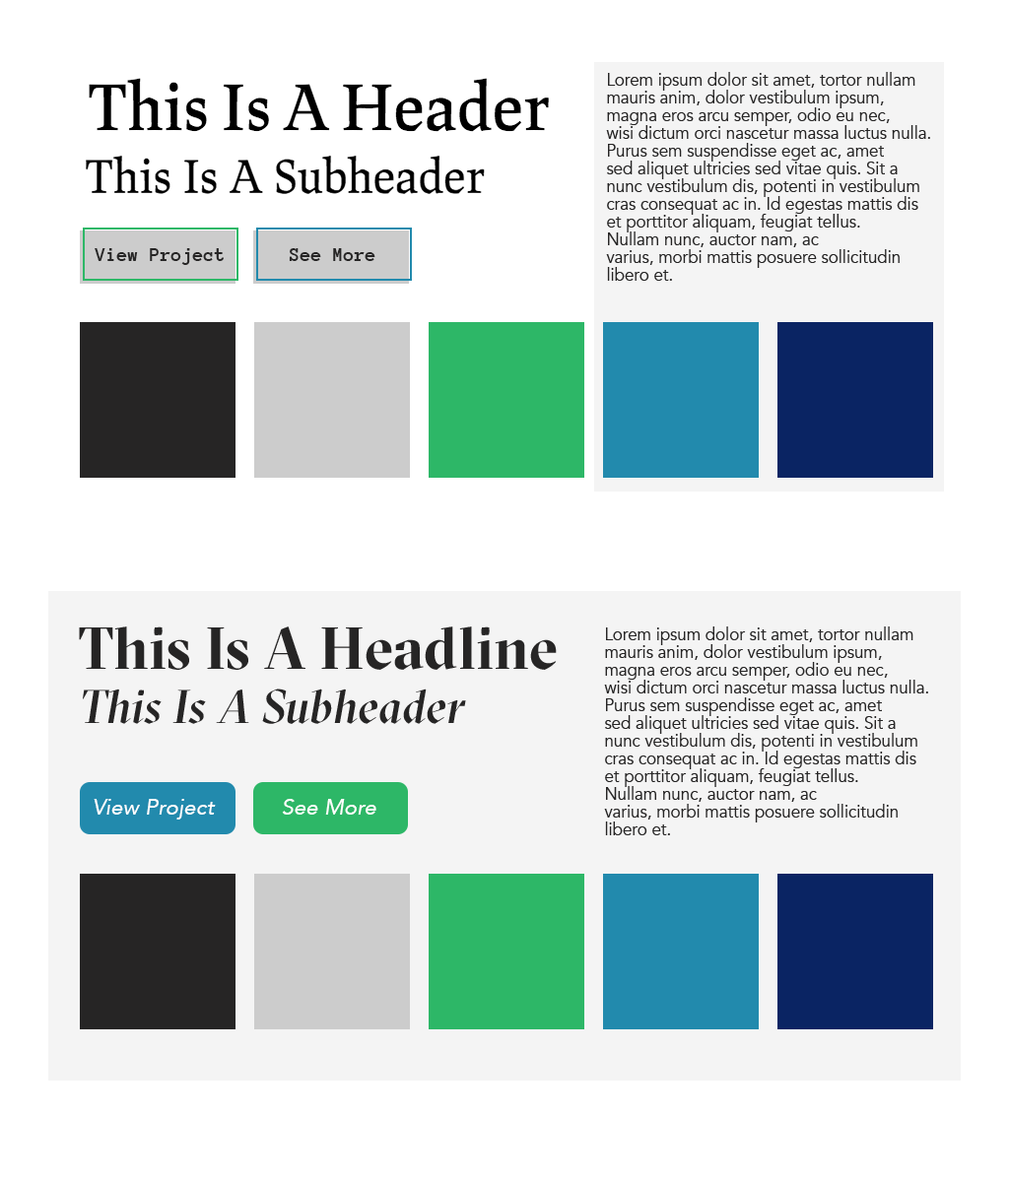
<style>
.page{position:relative;width:1009px;height:1182px;background:#ffffff}
.page>*{position:absolute;margin:0}
.t1{font:17.7px/17.7px "Avenir-Book";letter-spacing:0.005em;color:#262525;scale:0.93 1}
.t2{font:19.7px "AnonymousPro-Bold";letter-spacing:0.005em;color:#262525}
.t3{font:59.1px "GTSectraDisplayTrial-Bold";letter-spacing:0.005em;color:#262525}
.t4{font:47.3px "GTSectraDisplayTrialMedium-Italic";letter-spacing:0.005em;color:#262525}
.t5{font:21.7px "Avenir-Oblique";letter-spacing:0.005em;color:#ffffff}
</style>
<div class="page">
<p class="t1" style="left:606px;top:72px;width:324px;height:209px">Lorem ipsum dolor sit amet, tortor nullam <br>mauris anim, dolor vestibulum ipsum, <br>magna eros arcu semper, odio eu nec, <br>wisi dictum orci nascetur massa luctus nulla. <br>Purus sem suspendisse eget ac, amet <br>sed aliquet ultricies sed vitae quis. Sit a <br>nunc vestibulum dis, potenti in vestibulum <br>cras consequat ac in. Id egestas mattis dis <br>et porttitor aliquam, feugiat tellus. <br>Nullam nunc, auctor nam, ac <br>varius, morbi mattis posuere sollicitudin <br>libero et.</p>
<p class="t2" style="left:95px;top:248px;width:129px;height:17px">View Project</p>
<p class="t2" style="left:289px;top:248px;width:86px;height:13px">See More</p>
<p class="t3" style="left:79px;top:627px;width:478px;height:43px">This Is A Headline</p>
<p class="t1" style="left:604px;top:627px;width:324px;height:208px">Lorem ipsum dolor sit amet, tortor nullam <br>mauris anim, dolor vestibulum ipsum, <br>magna eros arcu semper, odio eu nec, <br>wisi dictum orci nascetur massa luctus nulla. <br>Purus sem suspendisse eget ac, amet <br>sed aliquet ultricies sed vitae quis. Sit a <br>nunc vestibulum dis, potenti in vestibulum <br>cras consequat ac in. Id egestas mattis dis <br>et porttitor aliquam, feugiat tellus. <br>Nullam nunc, auctor nam, ac <br>varius, morbi mattis posuere sollicitudin <br>libero et.</p>
<p class="t4" style="left:83px;top:689px;width:383px;height:35px">This Is A Subheader</p>
<p class="t5" style="left:94px;top:799px;width:122px;height:21px">View Project</p>
<p class="t5" style="left:282px;top:799px;width:94px;height:16px">See More</p>
</div>
